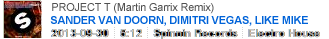
<style>
.page{position:relative;width:329px;height:39px;background:#ffffff}
.page>*{position:absolute;margin:0}
.t1{font:11px "ArialMT";letter-spacing:-0.02em;color:#505050}
.t2{font:11px "Arial-BoldMT";letter-spacing:-0.02em;color:#0063d8}
</style>
<div class="page">
<p class="t1" style="left:52px;top:3px;width:162px;height:11px">PROJECT T (Martin Garrix Remix)</p>
<p class="t2" style="left:50px;top:16px;width:258px;height:10px">SANDER VAN DOORN, DIMITRI VEGAS, LIKE MIKE</p>
</div>
